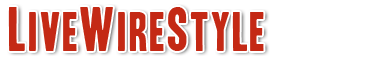
<style>
.page{position:relative;width:384px;height:60px;background:#ffffff}
.page>*{position:absolute;margin:0}
.t1{font:48px "HeadlineOneHPLHS";letter-spacing:0.05em;color:#c42915}
.t2{font:54px "HeadlineOneHPLHS";letter-spacing:0.05em;color:#c42915}
</style>
<div class="page">
<p class="t1" style="left:8px;top:7px;width:256px;height:44px"><span class="t2">L</span>ive<span class="t2">W</span>ire<span class="t2">S</span>tyle</p>
</div>
